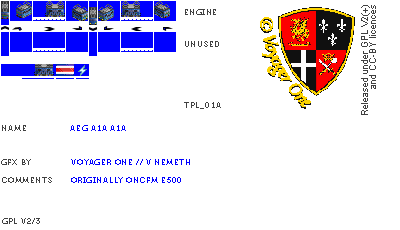
<style>
.page{position:relative;width:400px;height:230px;background:#ffffff}
.page>*{position:absolute;margin:0}
.t1{font:8px "Museo700-Regular";letter-spacing:0.075em;color:#404040;text-transform:uppercase}
.t2{font:8px "Museo700-Regular";letter-spacing:0.075em;color:#0000ff;text-transform:uppercase}
</style>
<div class="page">
<p class="t1" style="left:185px;top:9px;width:31px;height:6px">engine</p>
<p class="t1" style="left:185px;top:41px;width:34px;height:6px">unused</p>
<p class="t1" style="left:184px;top:102px;width:37px;height:7px">tpl_01a</p>
<p class="t1" style="left:2px;top:125px;width:24px;height:6px">name</p>
<p class="t2" style="left:70px;top:125px;width:56px;height:6px">AEG A1A A1A</p>
<p class="t1" style="left:1px;top:159px;width:30px;height:6px">gfx by</p>
<p class="t2" style="left:71px;top:159px;width:119px;height:6px">voyager one // v nemeth</p>
<p class="t1" style="left:2px;top:177px;width:50px;height:6px">comments</p>
<p class="t2" style="left:71px;top:177px;width:110px;height:6px">originally oncfm e500</p>
<p class="t1" style="left:2px;top:218px;width:38px;height:6px">gpl v2/3</p>
</div>
